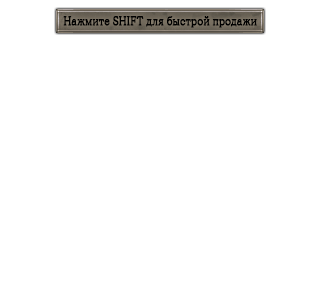
<style>
.page{position:relative;width:320px;height:288px;background:#ffffff}
.page>*{position:absolute;margin:0}
.t1{font:12.1px "CooperLightCBT";letter-spacing:0.01em;color:#000000;font-weight:bold;scale:0.82 1}
</style>
<div class="page">
<p class="t1" style="left:63px;top:16px;width:194px;height:12px">Нажмите SHIFT для быстрой продажи</p>
</div>
